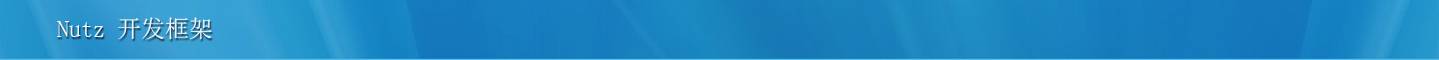
<style>
.page{position:relative;width:1439px;height:60px}
.page>*{position:absolute;margin:0}
.t1{font:24px "SimSun";color:#eff6fc}
</style>
<div class="page">
<p class="t1" style="left:57px;top:17px;width:155px;height:23px">Nutz 开发框架</p>
</div>
